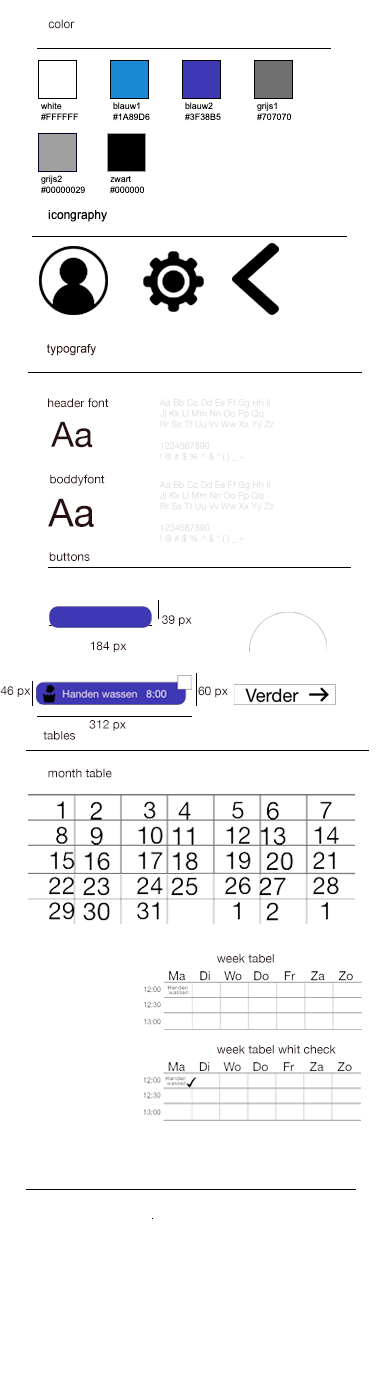
<style>
.page{position:relative;width:379px;height:1400px;background:#ffffff}
.page>*{position:absolute;margin:0}
.t1{font:12px "ArialMT";color:#291010}
.t2{font:8.9px "ArialMT";color:#000000}
.t3{font:12px "ArialMT";color:#020101}
.t4{font:12px "HelveticaNeue";color:#291010}
.t5{font:9px "HelveticaNeue";color:#dddddd}
.t6{font:35px "HelveticaNeue";color:#291010}
.t7{font:39px "HelveticaNeue";color:#291010}
</style>
<div class="page">
<p class="t1" style="left:48px;top:19px;width:27px;height:10px">color</p>
<p class="t2" style="left:41px;top:102px;width:38px;height:19px">white#<br>#FFFFFF</p>
<p class="t2" style="left:113px;top:102px;width:37px;height:19px">blauw1<br>#1A89D6</p>
<p class="t2" style="left:185px;top:102px;width:36px;height:19px">blauw2<br>#3F38B5</p>
<p class="t2" style="left:257px;top:102px;width:35px;height:19px">grijs1<br>#707070</p>
<p class="t2" style="left:41px;top:175px;width:44px;height:19px">grijs2<br>#00000029</p>
<p class="t2" style="left:110px;top:175px;width:35px;height:19px">zwart<br>#000000</p>
<p class="t3" style="left:48px;top:210px;width:59px;height:12px">icongraphy</p>
<p class="t4" style="left:48px;top:398px;width:61px;height:10px">header font</p>
<p class="t5" style="left:159px;top:399px;width:115px;height:63px">Aa Bb Cc Dd Ee Ff Gg Hh Ii<br>Jj Kk Ll Mm Nn Oo Pp Qq<br>Rr Ss Tt Uu Vv Ww Xx Yy Zz<br><br>1234567890<br>! @ # $ % ^ &amp; * ( ) _ +</p>
<p class="t6" style="left:51px;top:421px;width:42px;height:27px">Aa</p>
<p class="t4" style="left:50px;top:474px;width:55px;height:12px">boddyfont</p>
<p class="t5" style="left:159px;top:481px;width:115px;height:63px">Aa Bb Cc Dd Ee Ff Gg Hh Ii<br>Jj Kk Ll Mm Nn Oo Pp Qq<br>Rr Ss Tt Uu Vv Ww Xx Yy Zz<br><br>1234567890<br>! @ # $ % ^ &amp; * ( ) _ +</p>
<p class="t7" style="left:48px;top:498px;width:46px;height:29px">Aa</p>
<p class="t4" style="left:49px;top:552px;width:41px;height:9px">buttons</p>
<p class="t4" style="left:162px;top:615px;width:30px;height:11px">39 px</p>
<p class="t4" style="left:90px;top:641px;width:37px;height:12px">184 px</p>
<p class="t4" style="left:0px;top:686px;width:31px;height:11px">46 px</p>
<p class="t4" style="left:198px;top:686px;width:30px;height:12px">60 px</p>
<p class="t4" style="left:89px;top:720px;width:37px;height:11px">312 px</p>
<p class="t4" style="left:43px;top:731px;width:32px;height:9px">tables</p>
<p class="t4" style="left:48px;top:768px;width:64px;height:10px">month table</p>
<p class="t4" style="left:217px;top:954px;width:57px;height:9px">week tabel</p>
<p class="t4" style="left:217px;top:1045px;width:119px;height:9px">week tabel whit check</p>
</div>
